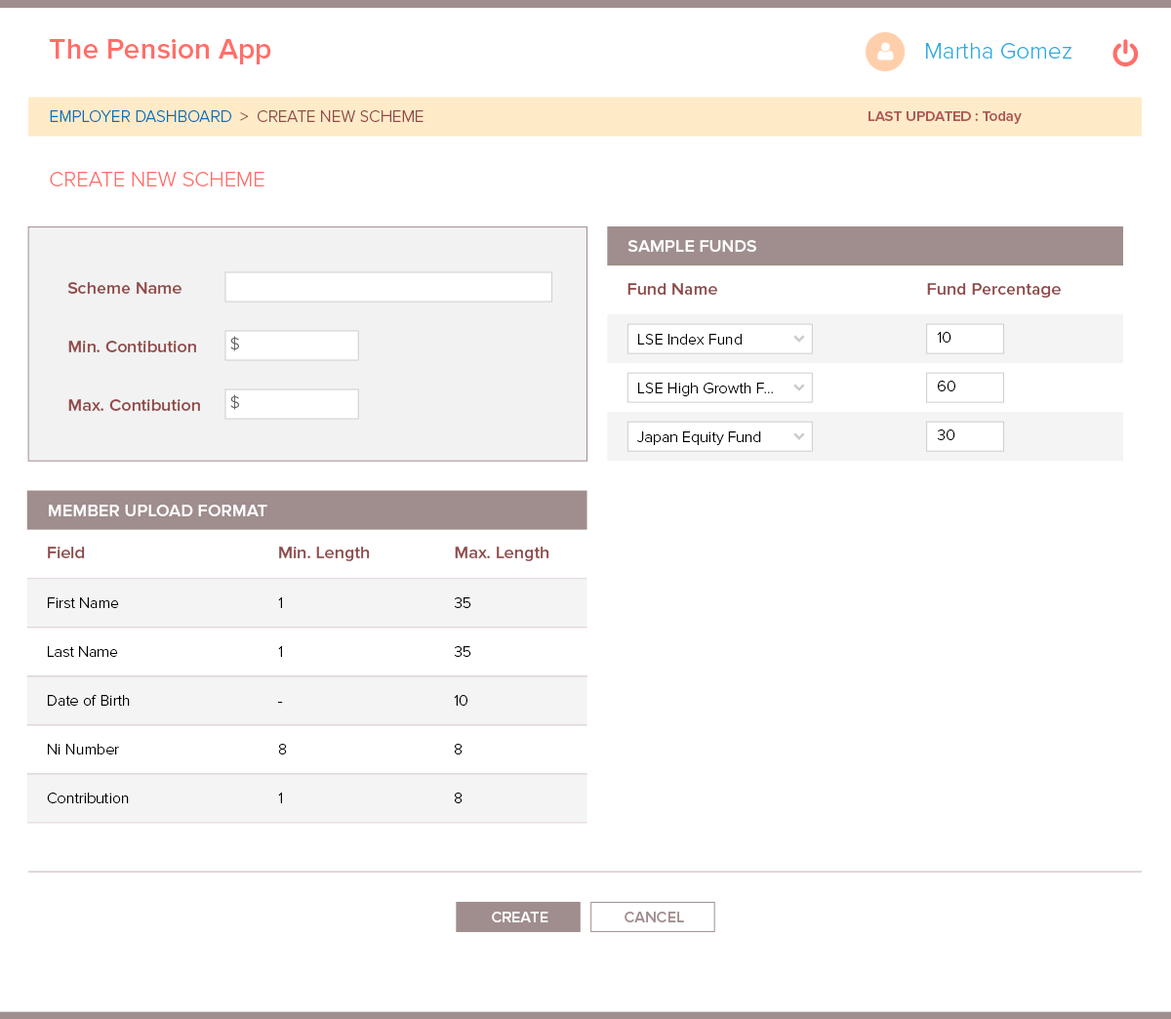
<style>
.page{position:relative;width:1171px;height:1019px;background:#ffffff}
.page>*{position:absolute;margin:0}
.t1{font:29.3px "ProximaNova-Semibold";color:#ff6f69}
.t2{font:23.4px "ProximaNova-Light";color:#29abe2}
.t3{font:16.6px "ProximaNova-Light";color:#914a4a}
.t4{font:16.6px "ProximaNova-Light";color:#0071bc}
.t5{font:14.6px "ProximaNova-Semibold";color:#af5858}
.t6{font:21.5px "ProximaNova-Light";color:#ff6f69}
.t7{font:17.6px "ProximaNova-Semibold";color:#ffffff}
.t8{font:17.6px "ProximaNova-Semibold";color:#914a4a}
.t9{font:16.7px "ProximaNova-Semibold";color:#914a4a;scale:1.05 1}
.t10{font:16.6px "ProximaNova-Light";color:#666666}
.t11{font:15.6px "ProximaNova-Light";color:#000000}
.t12{font:15.6px "ProximaNova-Semibold";color:#ffffff}
.t13{font:15.6px "ProximaNova-Semibold";color:#a08d8d}
</style>
<div class="page">
<p class="t1" style="left:50px;top:39px;width:221px;height:25px">The Pension App</p>
<p class="t2" style="left:926px;top:43px;width:145px;height:16px">Martha Gomez</p>
<p class="t3" style="left:50px;top:110px;width:373px;height:12px"><span class="t4">EMPLOYER DASHBOARD</span>  &gt;  CREATE NEW SCHEME</p>
<p class="t5" style="left:868px;top:111px;width:153px;height:13px">LAST UPDATED : Today</p>
<p class="t6" style="left:50px;top:172px;width:214px;height:14px">CREATE NEW SCHEME</p>
<p class="t7" style="left:627px;top:240px;width:129px;height:12px">SAMPLE FUNDS</p>
<p class="t8" style="left:67px;top:282px;width:114px;height:12px">Scheme Name</p>
<p class="t8" style="left:627px;top:283px;width:90px;height:12px">Fund Name</p>
<p class="t9" style="left:927px;top:283px;width:133px;height:15px">Fund Percentage</p>
<p class="t8" style="left:68px;top:340px;width:128px;height:12px">Min. Contibution</p>
<p class="t10" style="left:230px;top:336px;width:9px;height:15px">$</p>
<p class="t11" style="left:638px;top:334px;width:103px;height:10px">LSE Index Fund</p>
<p class="t11" style="left:937px;top:332px;width:14px;height:10px">10</p>
<p class="t11" style="left:638px;top:382px;width:135px;height:14px">LSE High Growth F...</p>
<p class="t11" style="left:938px;top:380px;width:17px;height:11px">60</p>
<p class="t8" style="left:68px;top:399px;width:132px;height:12px">Max. Contibution</p>
<p class="t10" style="left:230px;top:394px;width:9px;height:16px">$</p>
<p class="t11" style="left:637px;top:431px;width:124px;height:14px">Japan Equity Fund</p>
<p class="t11" style="left:937px;top:429px;width:18px;height:11px">30</p>
<p class="t7" style="left:49px;top:504px;width:218px;height:12px">MEMBER UPLOAD FORMAT</p>
<p class="t8" style="left:48px;top:546px;width:37px;height:12px">Field</p>
<p class="t9" style="left:279px;top:546px;width:91px;height:15px">Min. Length</p>
<p class="t9" style="left:455px;top:546px;width:94px;height:15px">Max. Length</p>
<p class="t11" style="left:48px;top:597px;width:71px;height:11px">First Name</p>
<p class="t11" style="left:278px;top:597px;width:4px;height:11px">1</p>
<p class="t11" style="left:454px;top:597px;width:17px;height:11px">35</p>
<p class="t11" style="left:48px;top:646px;width:70px;height:11px">Last Name</p>
<p class="t11" style="left:278px;top:646px;width:4px;height:11px">1</p>
<p class="t11" style="left:454px;top:646px;width:17px;height:11px">35</p>
<p class="t11" style="left:48px;top:695px;width:82px;height:10px">Date of Birth</p>
<p class="t11" style="left:278px;top:701px;width:5px;height:1px">-</p>
<p class="t11" style="left:454px;top:695px;width:13px;height:10px">10</p>
<p class="t11" style="left:48px;top:743px;width:71px;height:11px">Ni Number</p>
<p class="t11" style="left:278px;top:743px;width:9px;height:11px">8</p>
<p class="t11" style="left:455px;top:743px;width:7px;height:11px">8</p>
<p class="t11" style="left:47px;top:792px;width:82px;height:11px">Contribution</p>
<p class="t11" style="left:278px;top:792px;width:4px;height:11px">1</p>
<p class="t11" style="left:455px;top:792px;width:7px;height:11px">8</p>
<p class="t12" style="left:492px;top:911px;width:56px;height:11px">CREATE</p>
<p class="t13" style="left:624px;top:911px;width:60px;height:11px">CANCEL</p>
</div>
